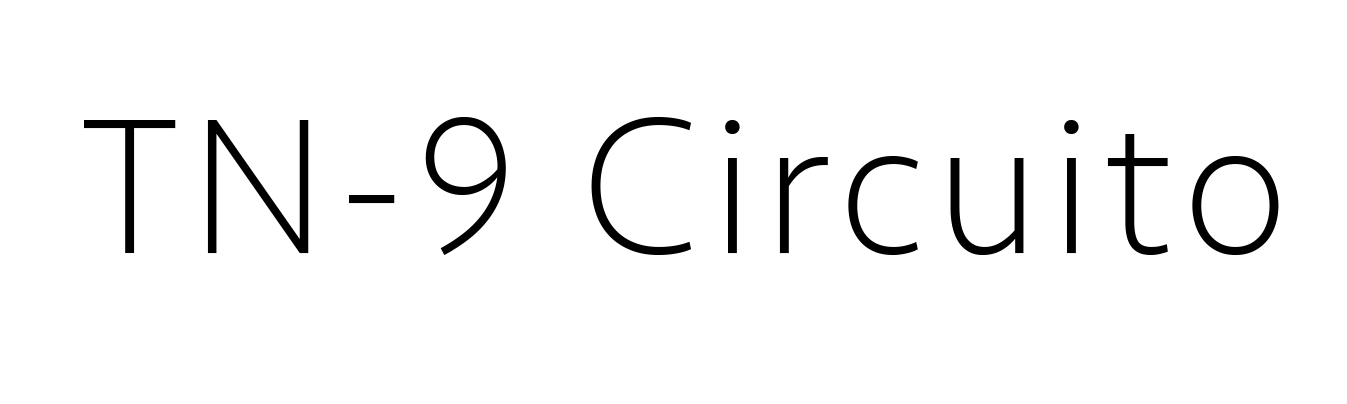
<style>
.page{position:relative;width:1347px;height:404px;background:#ffffff}
.page>*{position:absolute;margin:0}
.t1{font:200px "Seravek-ExtraLight";letter-spacing:0.05em;color:#000000}
</style>
<div class="page">
<p class="t1" style="left:84px;top:117px;width:1195px;height:138px">TN-9 Circuito</p>
</div>
